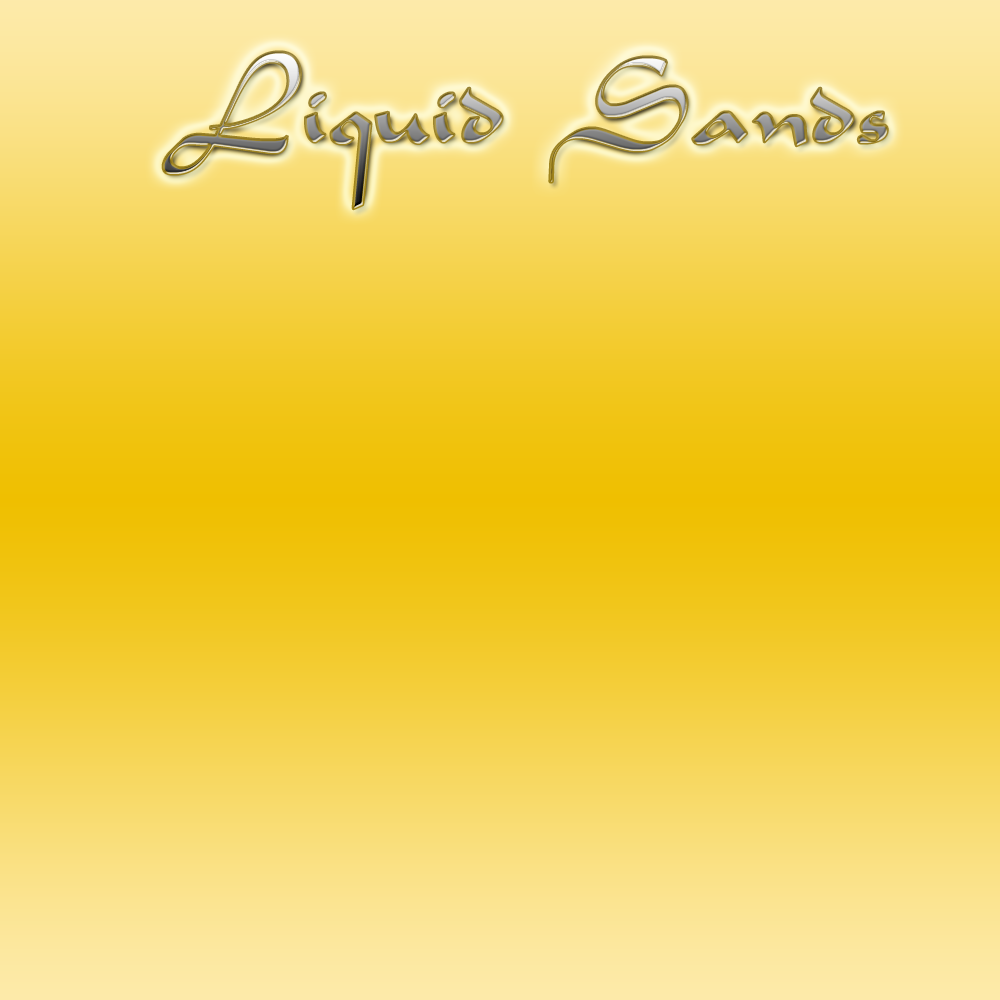
<style>
.page{position:relative;width:1000px;height:1000px}
.page>*{position:absolute;margin:0}
.t1{font:130px "Aladdin"}
</style>
<div class="page">
<p class="t1" style="left:163px;top:52px;width:725px;height:157px">Liquid Sands</p>
</div>
